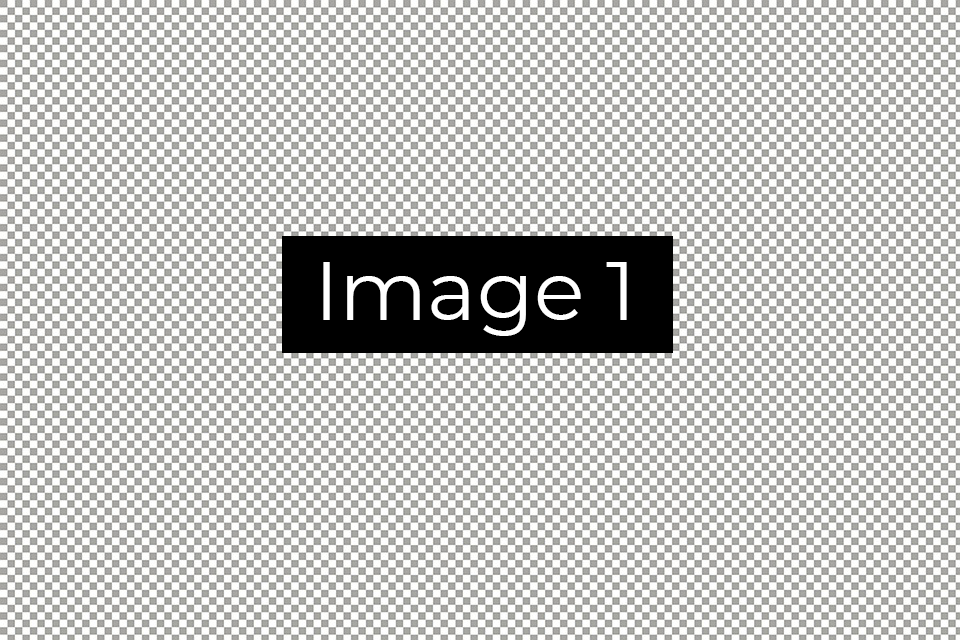
<style>
.page{position:relative;width:960px;height:640px}
.page>*{position:absolute;margin:0}
.t1{font:83.3px "Montserrat-Regular";color:#ffffff}
</style>
<div class="page">
<p class="t1" style="left:323px;top:262px;width:304px;height:74px">Image 1</p>
</div>
